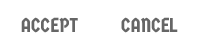
<style>
.page{position:relative;width:200px;height:50px;background:#ffffff}
.page>*{position:absolute;margin:0}
.t1{font:20px "GermaniaOne-Regular";color:#666666}
</style>
<div class="page">
<p class="t1" style="left:21px;top:17px;width:57px;height:16px">ACCEPT</p>
<p class="t1" style="left:121px;top:17px;width:57px;height:16px">CANCEL</p>
</div>
